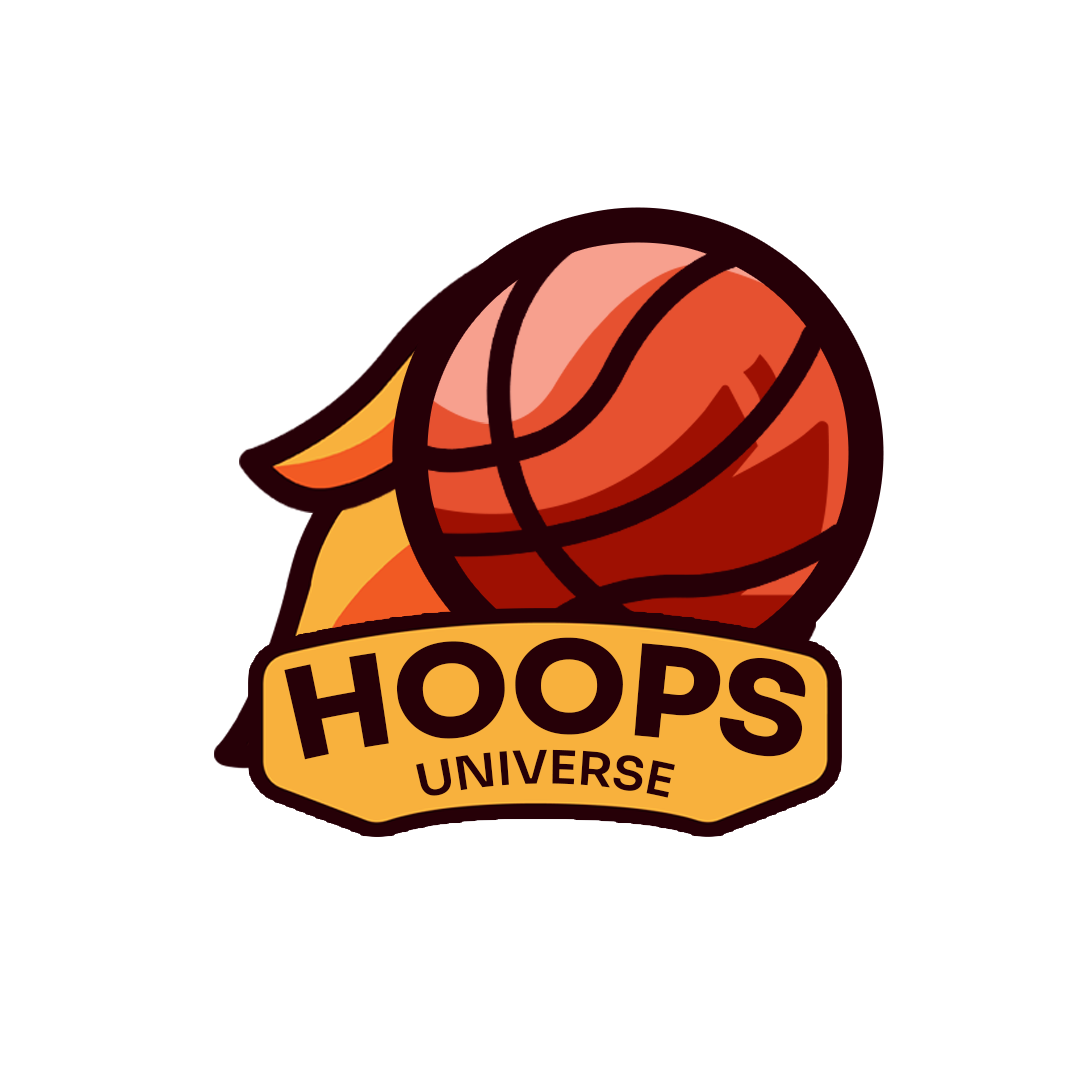
<style>
.page{position:relative;width:1080px;height:1080px;background:#ffffff}
.page>*{position:absolute;margin:0}
.t1{font:125.5px "Sora-ExtraBold";letter-spacing:0.003em;color:#260007}
.t2{font:46px "Sora-SemiBold";letter-spacing:0.003em;color:#260007}
</style>
<div class="page">
<p class="t1" style="left:284px;top:637px;width:522px;height:123px">HOOPS</p>
<p class="t2" style="left:416px;top:749px;width:259px;height:49px">UNIVERSE</p>
</div>
